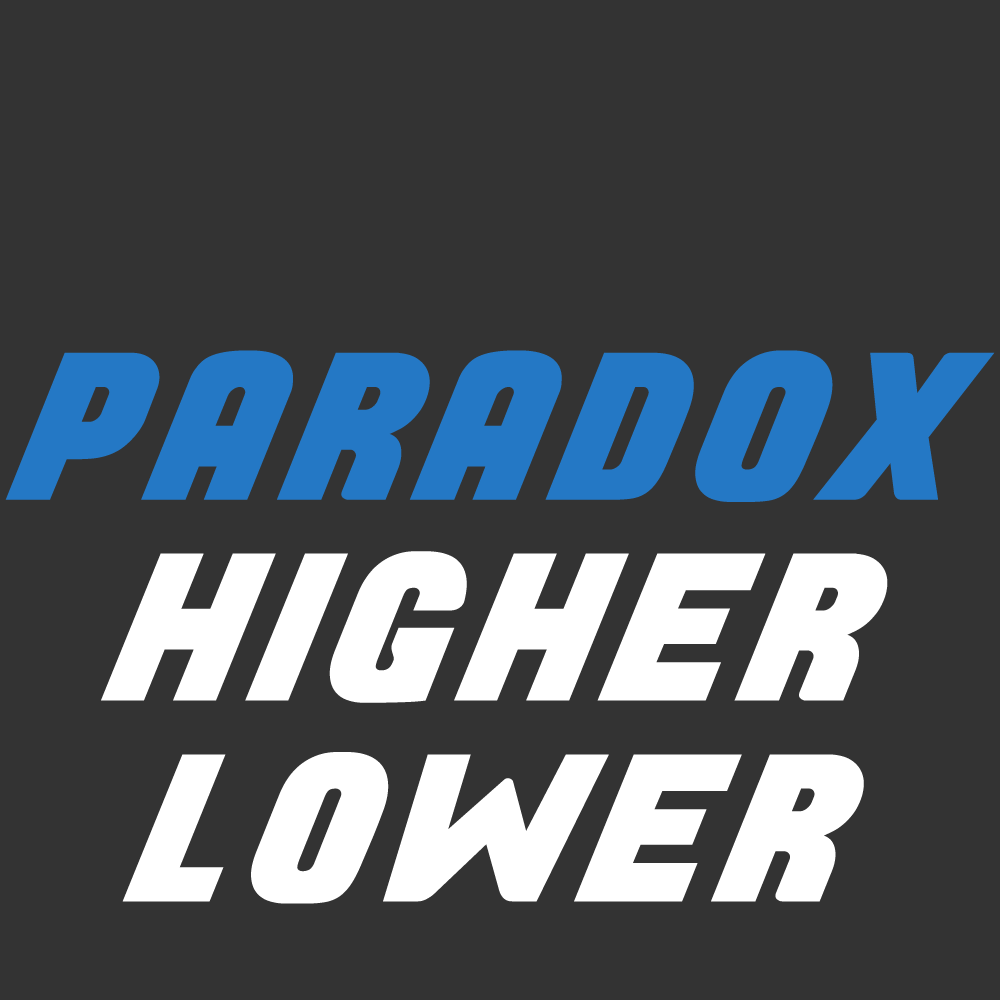
<style>
.page{position:relative;width:1000px;height:1000px;background:#333333}
.page>*{position:absolute;margin:0}
.t1{font:199.6px/200.8px "Longhaul";letter-spacing:0.08em;color:#ffffff}
.t2{font:199.6px/200.8px "Longhaul";letter-spacing:0.08em;color:#2478c5}
</style>
<div class="page">
<p class="t1" style="left:5px;top:350px;width:990px;height:554px;text-align:center"><span class="t2">PARADOX<br></span>HIGHER<br>LOWER</p>
</div>
